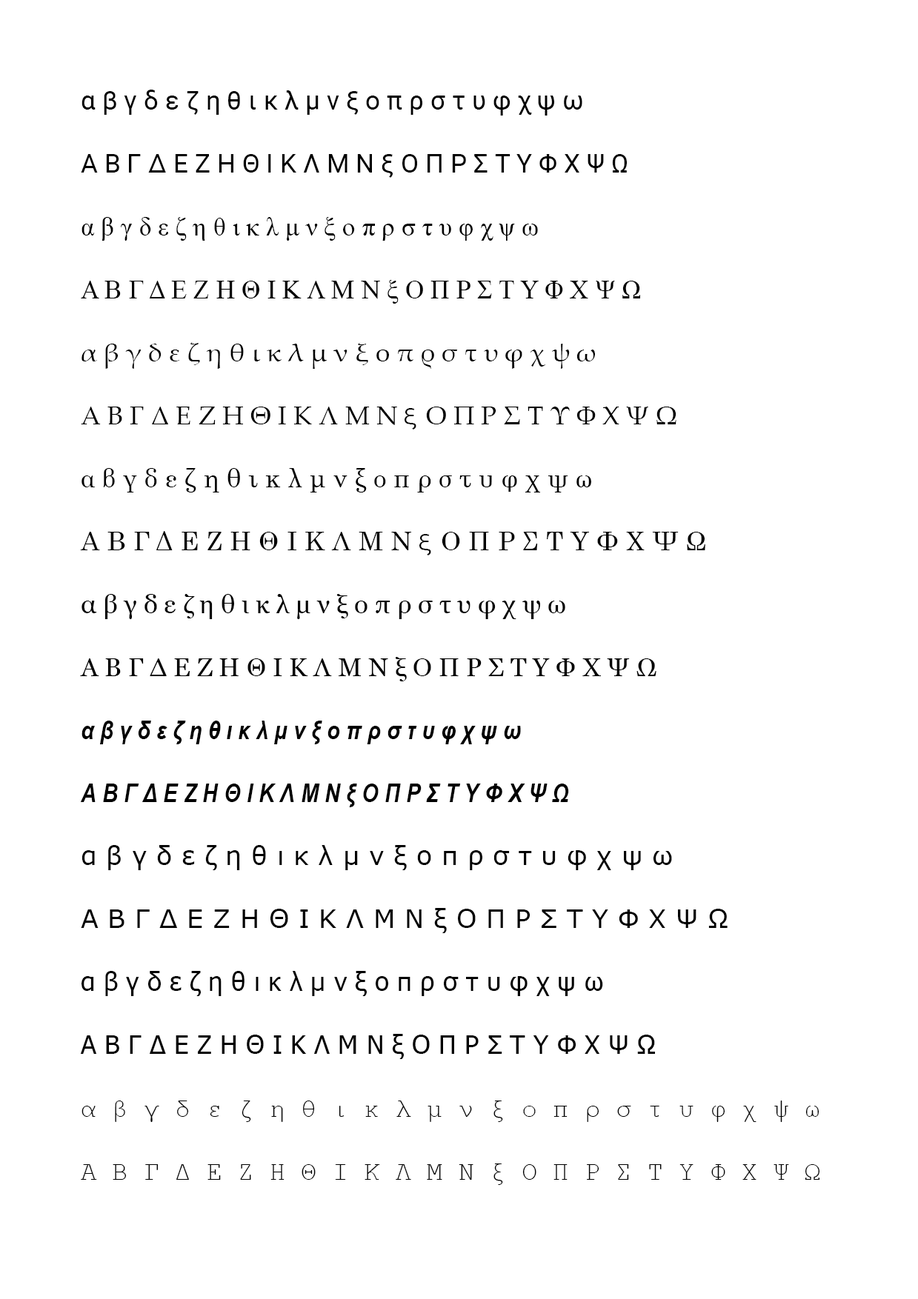
<style>
.page{position:relative;width:918px;height:1299px;background:#ffffff}
.page>*{position:absolute;margin:0}
.t1{font:26.2px "Roboto-Regular";color:#000000}
.t2{font:26.2px "TimesNewRomanPSMT";color:#000000}
.t3{font:26.2px "PalatinoLinotype-Roman";color:#000000}
.t4{font:26.2px "AnonymousPro";color:#000000}
.t5{font:26.2px "CenturySchoolbook";color:#000000}
.t6{font:26.2px "Georgia";color:#000000}
.t7{font:26.2px "ArialNarrow-BoldItalic";color:#000000}
.t8{font:26.2px "Verdana";color:#000000}
.t9{font:26.2px "Tahoma";color:#000000}
.t10{font:26.2px "CourierNewPSMT";color:#000000}
</style>
<div class="page">
<p class="t1" style="left:80px;top:90px;width:740px;height:1095px">α β γ δ ε ζ η θ ι κ λ μ ν ξ ο π ρ σ τ υ φ χ ψ ω<br><br>Α Β Γ Δ Ε Ζ Η Θ Ι Κ Λ Μ Ν ξ Ο Π Ρ Σ Τ Υ Φ Χ Ψ Ω<br><br><span class="t2">α β γ δ ε ζ η θ ι κ λ μ ν ξ ο π ρ σ τ υ φ χ ψ ω<br><br>Α Β Γ Δ Ε Ζ Η Θ Ι Κ Λ Μ Ν ξ Ο Π Ρ Σ Τ Υ Φ Χ Ψ Ω<br><br></span><span class="t3">α β γ δ ε ζ η θ ι κ λ μ ν ξ ο π ρ σ τ υ φ χ ψ ω<br><br>Α Β Γ Δ Ε Ζ Η Θ Ι Κ Λ Μ Ν </span><span class="t4">ξ</span><span class="t3"> Ο Π Ρ Σ Τ Υ Φ Χ Ψ Ω<br><br></span><span class="t5">α β γ δ ε ζ η θ ι κ λ μ ν ξ ο π ρ σ τ υ φ χ ψ ω<br><br>Α Β Γ Δ Ε Ζ Η Θ Ι Κ Λ Μ Ν </span><span class="t4">ξ</span><span class="t5"> Ο Π Ρ Σ Τ Υ Φ Χ Ψ Ω<br><br></span><span class="t6">α β γ δ ε ζ η θ ι κ λ μ ν ξ ο π ρ σ τ υ φ χ ψ ω<br><br>Α Β Γ Δ Ε Ζ Η Θ Ι Κ Λ Μ Ν ξ Ο Π Ρ Σ Τ Υ Φ Χ Ψ Ω<br><br></span><span class="t7">α β γ δ ε ζ η θ ι κ λ μ ν ξ ο π ρ σ τ υ φ χ ψ ω<br><br>Α Β Γ Δ Ε Ζ Η Θ Ι Κ Λ Μ Ν ξ Ο Π Ρ Σ Τ Υ Φ Χ Ψ Ω<br><br></span><span class="t8">α β γ δ ε ζ η θ ι κ λ μ ν ξ ο π ρ σ τ υ φ χ ψ ω<br><br>Α Β Γ Δ Ε Ζ Η Θ Ι Κ Λ Μ Ν ξ Ο Π Ρ Σ Τ Υ Φ Χ Ψ Ω<br><br></span><span class="t9">α β γ δ ε ζ η θ ι κ λ μ ν ξ ο π ρ σ τ υ φ χ ψ ω<br><br>Α Β Γ Δ Ε Ζ Η Θ Ι Κ Λ Μ Ν ξ Ο Π Ρ Σ Τ Υ Φ Χ Ψ Ω<br><br></span><span class="t10">α β γ δ ε ζ η θ ι κ λ μ ν ξ ο π ρ σ τ υ φ χ ψ ω<br><br>Α Β Γ Δ Ε Ζ Η Θ Ι Κ Λ Μ Ν ξ Ο Π Ρ Σ Τ Υ Φ Χ Ψ Ω</span></p>
</div>
